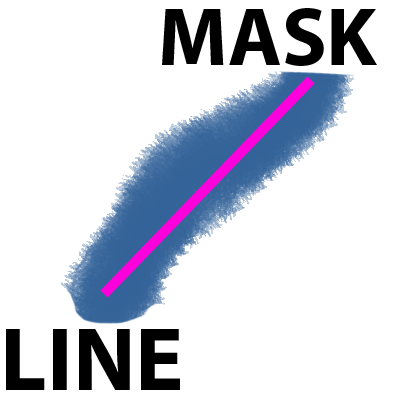
<style>
.page{position:relative;width:400px;height:400px;background:#ffffff}
.page>*{position:absolute;margin:0}
.t1{font:82.4px "MyriadPro-Bold";color:#000000}
.t2{font:91.1px "MyriadPro-Bold";color:#000000}
</style>
<div class="page">
<p class="t1" style="left:162px;top:8px;width:215px;height:58px">MASK</p>
<p class="t2" style="left:6px;top:329px;width:174px;height:61px">LINE</p>
</div>
